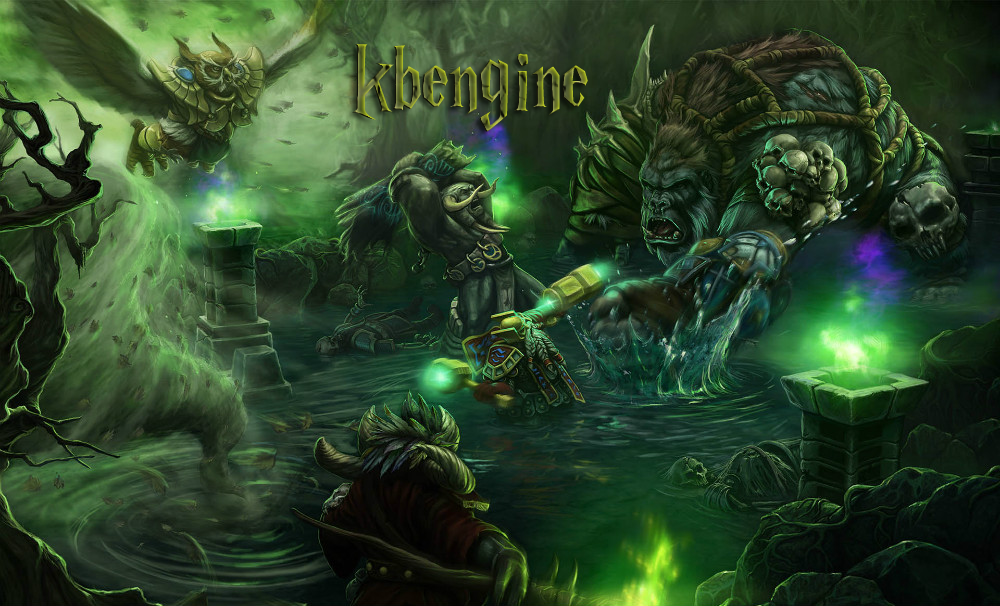
<style>
.page{position:relative;width:1000px;height:606px}
.page>*{position:absolute;margin:0}
.t1{font:100px "HarryP"}
</style>
<div class="page">
<p class="t1" style="left:352px;top:44px;width:236px;height:88px">kbengine</p>
</div>
